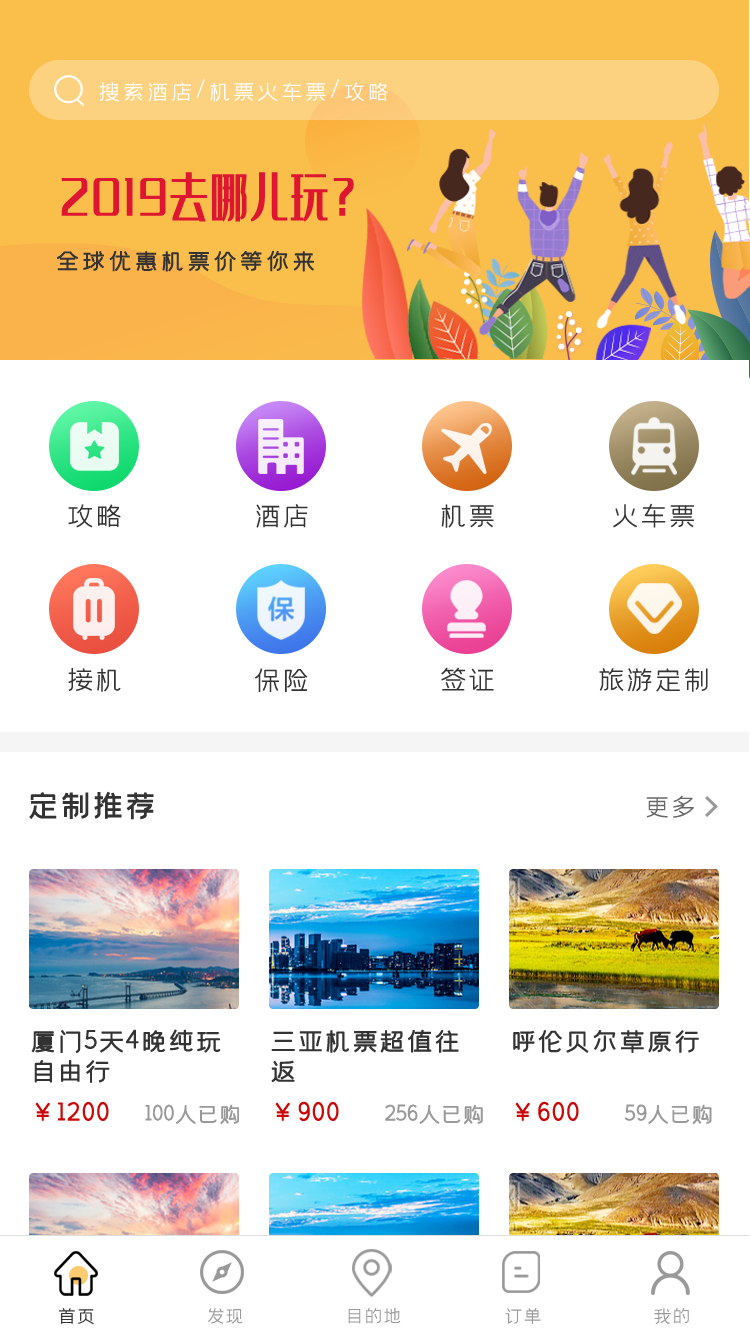
<style>
.page{position:relative;width:750px;height:1334px;background:#ffffff}
.page>*{position:absolute;margin:0}
.t1{font:24px "58--Regular";color:#fffefe}
.t2{font:49.9px "35--Regular";letter-spacing:0.08em;color:#dd1632;scale:0.75 1}
.t3{font:25.1px "58--Regular";letter-spacing:0.02em;color:#333333;font-weight:bold}
.t4{font:30px "58--Regular";letter-spacing:-0.05em;color:#333333}
.t5{font:34px "59--Regular";letter-spacing:-0.05em;color:#333333}
.t6{font:28px "58--Regular";letter-spacing:-0.05em;color:#666666}
.t7{font:28px/30px "58--Regular";letter-spacing:-0.05em;color:#333333;font-weight:bold}
.t8{font:28px "58--Regular";letter-spacing:-0.05em;color:#333333;font-weight:bold}
.t9{font:28px "58--Regular";letter-spacing:-0.05em;color:#c90707;font-weight:bold}
.t10{font:24px "58--Regular";letter-spacing:-0.1em;color:#999999;font-weight:bold}
.t11{font:20px "58--Regular";letter-spacing:-0.05em;color:#333333}
.t12{font:20px "58--Regular";letter-spacing:-0.05em;color:#999999}
</style>
<div class="page">
<p class="t1" style="left:99px;top:79px;width:289px;height:23px">搜索酒店/机票火车票/攻略</p>
<p class="t2" style="left:61px;top:172px;width:293px;height:50px">2019去哪儿玩？</p>
<p class="t3" style="left:57px;top:251px;width:257px;height:21px">全球优惠机票价等你来</p>
<p class="t4" style="left:68px;top:504px;width:53px;height:24px">攻略</p>
<p class="t4" style="left:256px;top:504px;width:52px;height:24px">酒店</p>
<p class="t4" style="left:441px;top:504px;width:53px;height:24px">机票</p>
<p class="t4" style="left:613px;top:503px;width:81px;height:25px">火车票</p>
<p class="t4" style="left:68px;top:668px;width:53px;height:24px">接机</p>
<p class="t4" style="left:255px;top:668px;width:53px;height:24px">保险</p>
<p class="t4" style="left:441px;top:667px;width:53px;height:24px">签证</p>
<p class="t4" style="left:599px;top:668px;width:109px;height:24px">旅游定制</p>
<p class="t5" style="left:29px;top:791px;width:125px;height:29px">定制推荐</p>
<p class="t6" style="left:646px;top:795px;width:48px;height:23px">更多</p>
<p class="t7" style="left:31px;top:1029px;width:190px;height:54px">厦门5天4晚纯玩<br>自由行</p>
<p class="t7" style="left:271px;top:1029px;width:188px;height:53px">三亚机票超值往<br>返</p>
<p class="t8" style="left:513px;top:1030px;width:186px;height:23px">呼伦贝尔草原行</p>
<p class="t9" style="left:35px;top:1101px;width:74px;height:20px">￥1200</p>
<p class="t10" style="left:145px;top:1104px;width:94px;height:21px">100人已购</p>
<p class="t9" style="left:275px;top:1101px;width:64px;height:20px">￥900</p>
<p class="t10" style="left:385px;top:1104px;width:98px;height:21px">256人已购</p>
<p class="t9" style="left:515px;top:1101px;width:64px;height:20px">￥600</p>
<p class="t10" style="left:624px;top:1104px;width:88px;height:21px">59人已购</p>
<p class="t11" style="left:59px;top:1308px;width:35px;height:17px">首页</p>
<p class="t12" style="left:208px;top:1308px;width:35px;height:16px">发现</p>
<p class="t12" style="left:348px;top:1308px;width:53px;height:16px">目的地</p>
<p class="t12" style="left:505px;top:1308px;width:36px;height:16px">订单</p>
<p class="t12" style="left:654px;top:1308px;width:35px;height:16px">我的</p>
</div>
